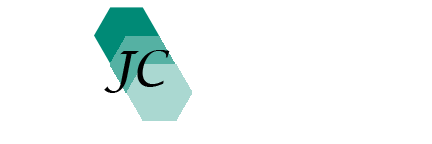
<style>
.page{position:relative;width:432px;height:144px;background:#ffffff}
.page>*{position:absolute;margin:0}
.t1{font:48px "LucidaCalligraphy-Italic";color:#000000}
</style>
<div class="page">
<p class="t1" style="left:104px;top:50px;width:66px;height:43px">JC</p>
</div>
